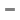
<style>
.page{position:relative;width:20px;height:20px;background:#ffffff}
.page>*{position:absolute;margin:0}
.t1{font:36px "ArialMT";color:#808080}
</style>
<div class="page">
<p class="t1" style="left:5px;top:8px;width:10px;height:3px">-</p>
</div>
